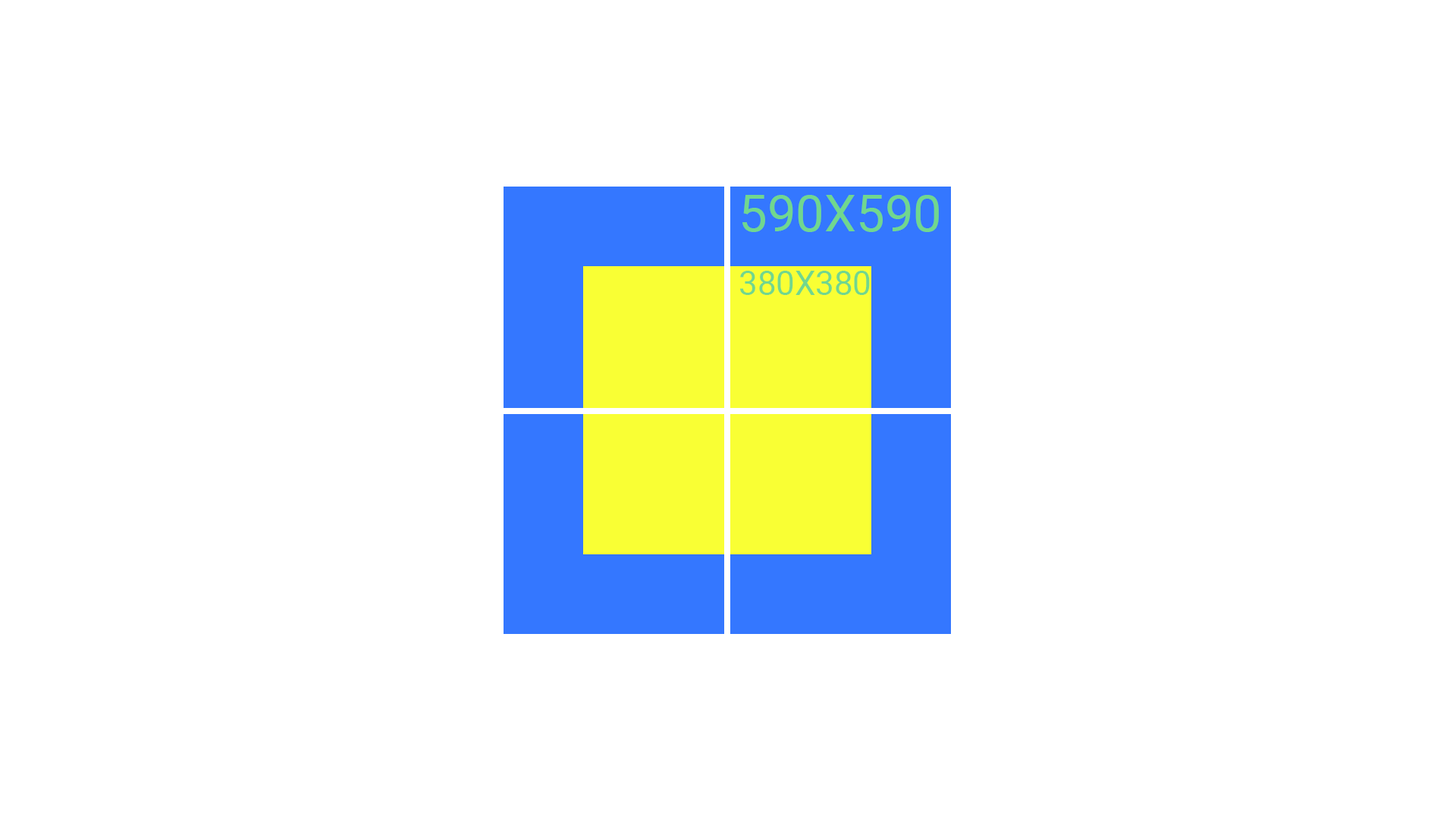
<style>
.page{position:relative;width:1456px;height:819px;background:#ffffff}
.page>*{position:absolute;margin:0}
.t1{font:50.8px "Roboto-Regular";color:#71d78e;text-transform:uppercase}
.t2{font:33.2px "Roboto-Regular";color:#71d78e;text-transform:uppercase}
</style>
<div class="page">
<p class="t1" style="left:742px;top:195px;width:197px;height:37px">590x590</p>
<p class="t2" style="left:740px;top:271px;width:130px;height:24px">380x380</p>
</div>
